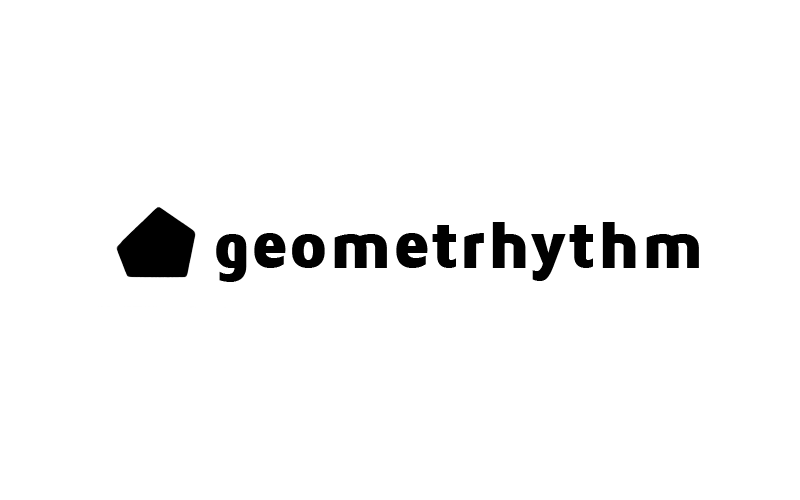
<style>
.page{position:relative;width:800px;height:500px;background:#ffffff}
.page>*{position:absolute;margin:0}
.t1{font:68px "MavenProBlack";color:#000000}
</style>
<div class="page">
<p class="t1" style="left:216px;top:222px;width:483px;height:60px">geometrhythm</p>
</div>
